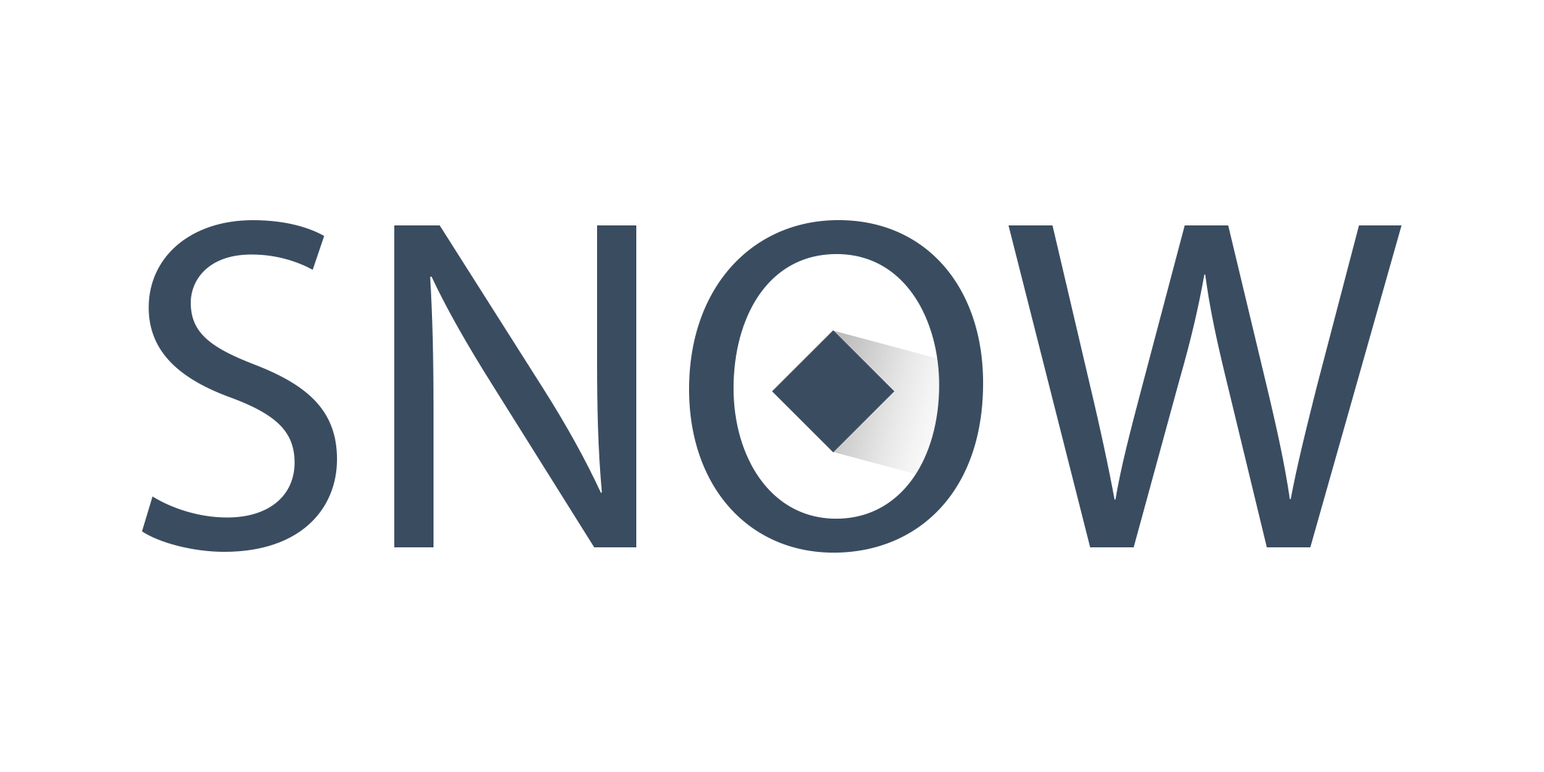
<style>
.page{position:relative;width:1544px;height:772px;background:#ffffff}
.page>*{position:absolute;margin:0}
.t1{font:477.6px "MyriadPro-Regular";color:#3a4c60}
</style>
<div class="page">
<p class="t1" style="left:142px;top:220px;width:1260px;height:333px">SNOW</p>
</div>
